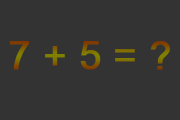
<style>
.page{position:relative;width:180px;height:120px;background:#333333}
.page>*{position:absolute;margin:0}
.t1{font:38.9px "ArialMT";font-weight:bold}
</style>
<div class="page">
<p class="t1" style="left:9px;top:41px;width:161px;height:29px">7 + 5 = ?</p>
</div>
